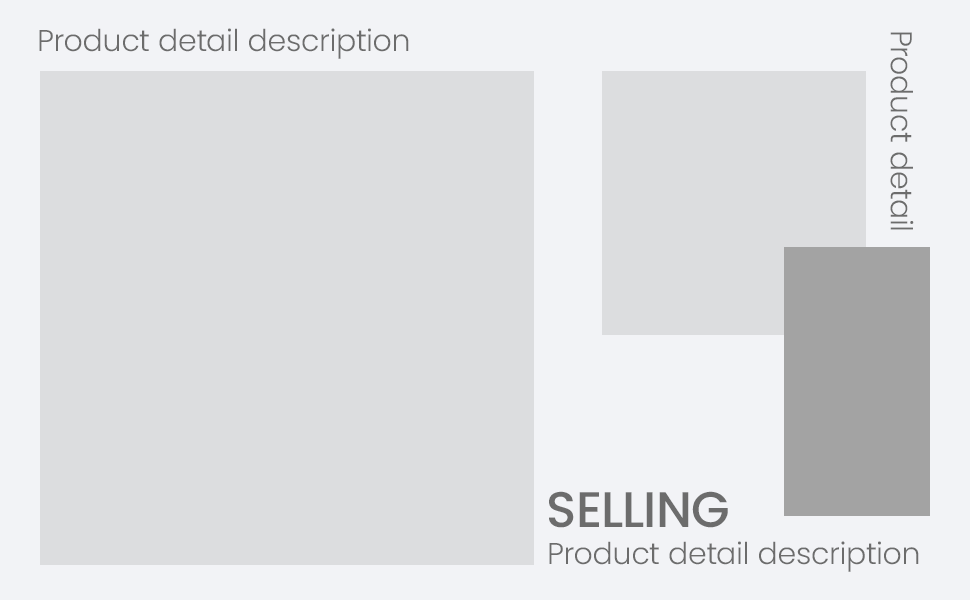
<style>
.page{position:relative;width:970px;height:600px;background:#dcdddf}
.page>*{position:absolute;margin:0}
.t1{font:30px "Poppins-Light";color:#6c6c6c}
.t2{font:50px "Poppins-Medium";color:#6c6c6c;text-transform:uppercase}
</style>
<div class="page">
<p class="t1" style="left:39px;top:28px;width:370px;height:31px">Product detail description</p>
<p class="t1" style="left:890px;top:32px;width:24px;height:198px;rotate:90deg">Product detail</p>
<p class="t2" style="left:549px;top:491px;width:179px;height:37px">selling</p>
<p class="t1" style="left:549px;top:541px;width:370px;height:31px">Product detail description</p>
</div>
